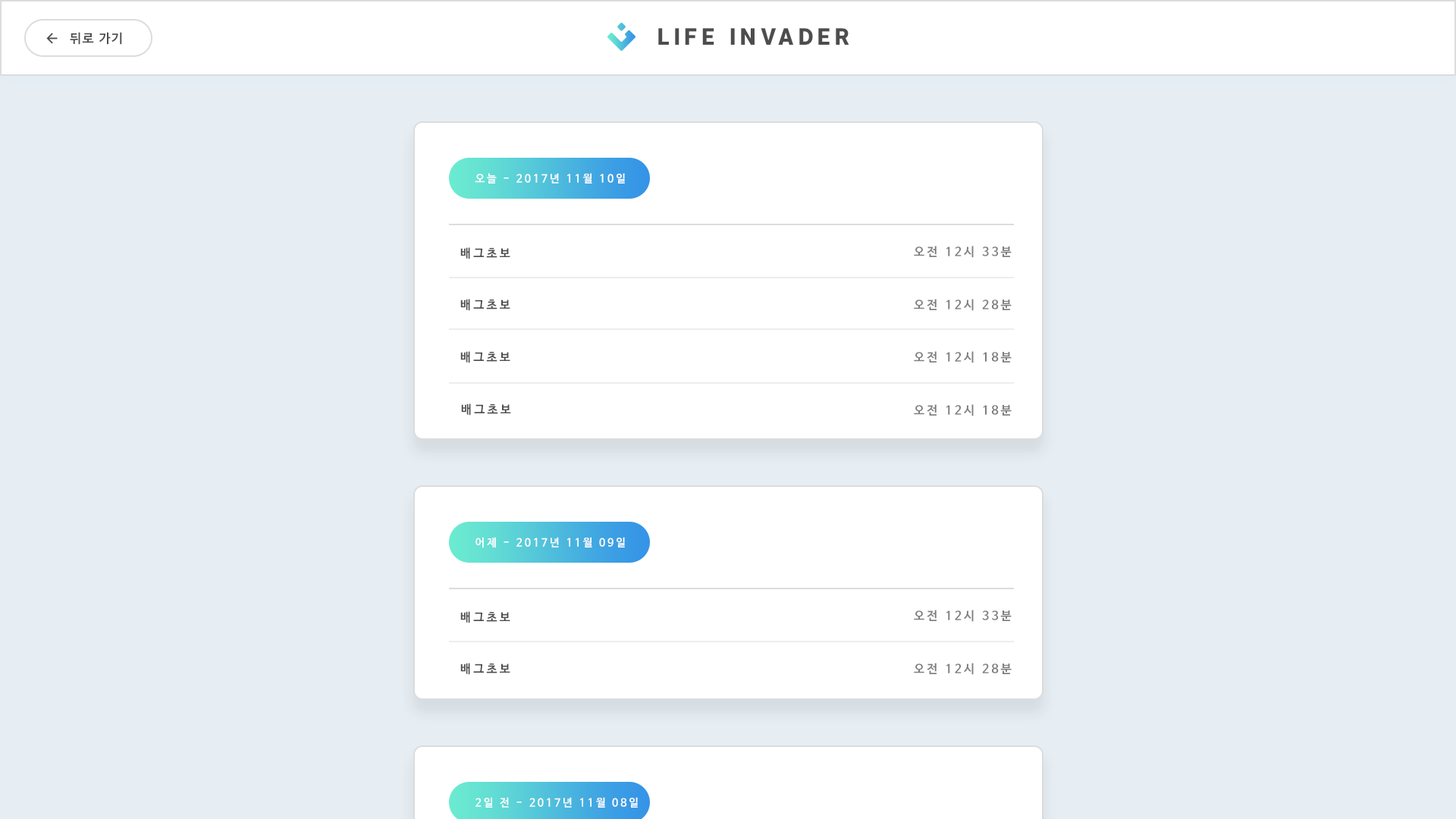
<style>
.page{position:relative;width:1456px;height:819px;background:#e6eef4}
.page>*{position:absolute;margin:0}
.t1{font:22.5px "InterUI-Black";letter-spacing:0.2em;color:#4d4d4d}
.t2{font:12.6px "NanumBarunGothicBold";letter-spacing:0.1em;color:#4d4d4d}
.t3{font:10.8px "NanumBarunGothicBold";letter-spacing:0.2em;color:#ffffff}
.t4{font:12px "NanumBarunGothicBold";letter-spacing:0.2em;color:#7e7e7e}
.t5{font:12px "NanumBarunGothicBold";letter-spacing:0.2em;color:#4d4d4d}
</style>
<div class="page">
<p class="t1" style="left:658px;top:28px;width:191px;height:17px">LIFE INVADER</p>
<p class="t2" style="left:70px;top:32px;width:52px;height:13px">뒤로 가기</p>
<p class="t3" style="left:475px;top:173px;width:150px;height:11px">오늘 - 2017년 11월 10일</p>
<p class="t4" style="left:914px;top:246px;width:98px;height:12px">오전 12시 33분</p>
<p class="t5" style="left:460px;top:247px;width:50px;height:12px">배그초보</p>
<p class="t5" style="left:460px;top:299px;width:50px;height:12px">배그초보</p>
<p class="t4" style="left:914px;top:299px;width:98px;height:12px">오전 12시 28분</p>
<p class="t5" style="left:460px;top:351px;width:50px;height:12px">배그초보</p>
<p class="t4" style="left:914px;top:351px;width:98px;height:12px">오전 12시 18분</p>
<p class="t5" style="left:461px;top:403px;width:50px;height:13px">배그초보</p>
<p class="t4" style="left:914px;top:404px;width:98px;height:12px">오전 12시 18분</p>
<p class="t3" style="left:475px;top:537px;width:150px;height:11px">어제 - 2017년 11월 09일</p>
<p class="t5" style="left:460px;top:611px;width:50px;height:12px">배그초보</p>
<p class="t4" style="left:914px;top:610px;width:98px;height:12px">오전 12시 33분</p>
<p class="t5" style="left:460px;top:663px;width:50px;height:12px">배그초보</p>
<p class="t4" style="left:914px;top:663px;width:98px;height:12px">오전 12시 28분</p>
<p class="t3" style="left:475px;top:797px;width:163px;height:11px">2일 전 - 2017년 11월 08일</p>
</div>
